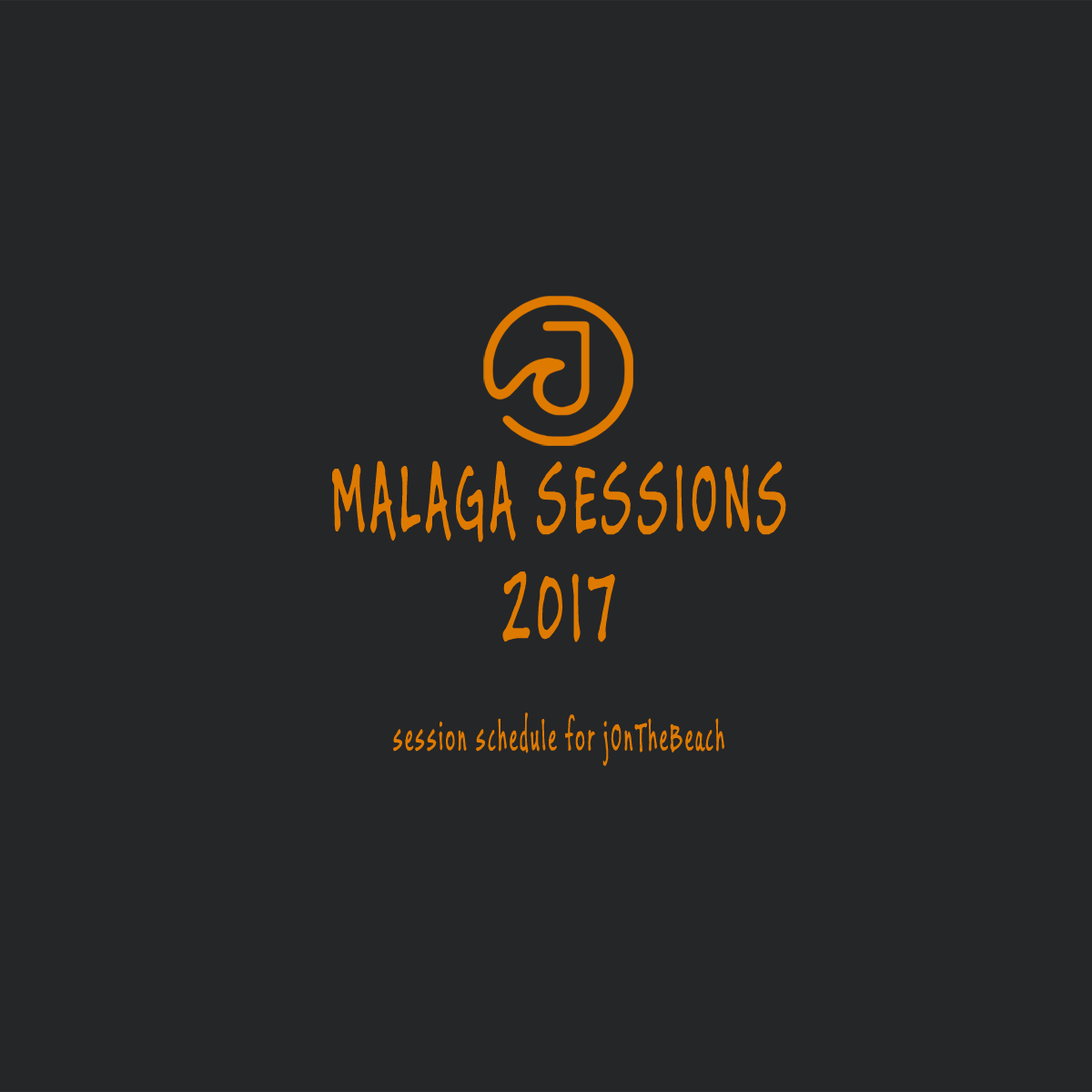
<style>
.page{position:relative;width:1092px;height:1092px;background:#252628}
.page>*{position:absolute;margin:0}
.t1{font:109.4px "BuxtonSketch";letter-spacing:0.1em;color:#de7a00;scale:0.5 1}
.t2{font:43.8px "BuxtonSketch";letter-spacing:0.1em;color:#de7a00;scale:0.5 1}
</style>
<div class="page">
<p class="t1" style="left:332px;top:460px;width:454px;height:82px">MALAGA SESSIONS</p>
<p class="t1" style="left:502px;top:571px;width:113px;height:71px">2017</p>
<p class="t2" style="left:393px;top:713px;width:331px;height:53px">session schedule for jOnTheBeach</p>
</div>
